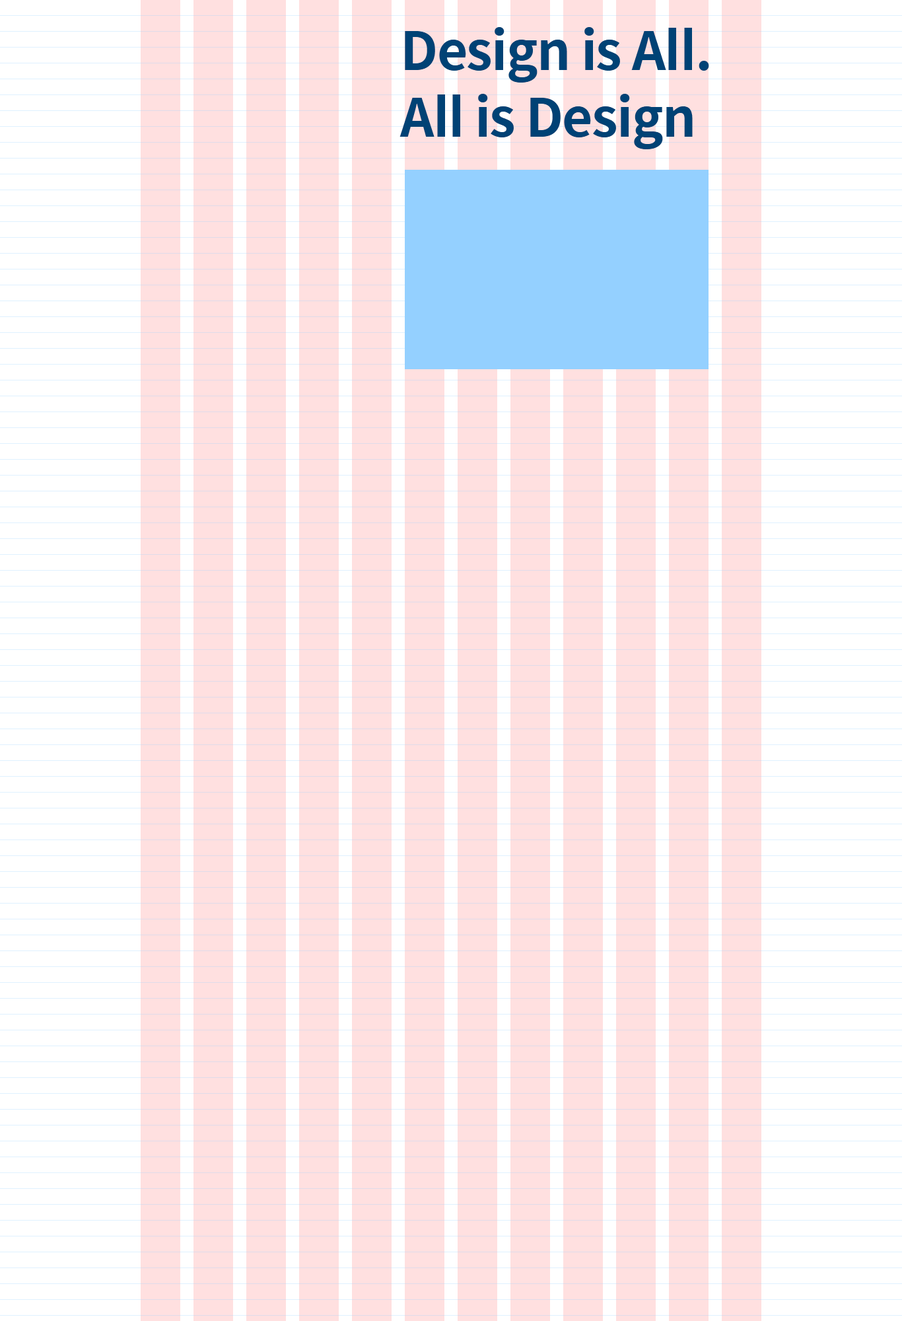
<style>
.page{position:relative;width:902px;height:1321px;background:#ffffff}
.page>*{position:absolute;margin:0}
.t1{font:52.9px/52.9px "SpoqaHanSans-Bold";letter-spacing:-0.02em;color:#004275}
</style>
<div class="page">
<p class="t1" style="left:400px;top:27px;width:310px;height:122px">Design is All.<br>All is Design</p>
</div>
